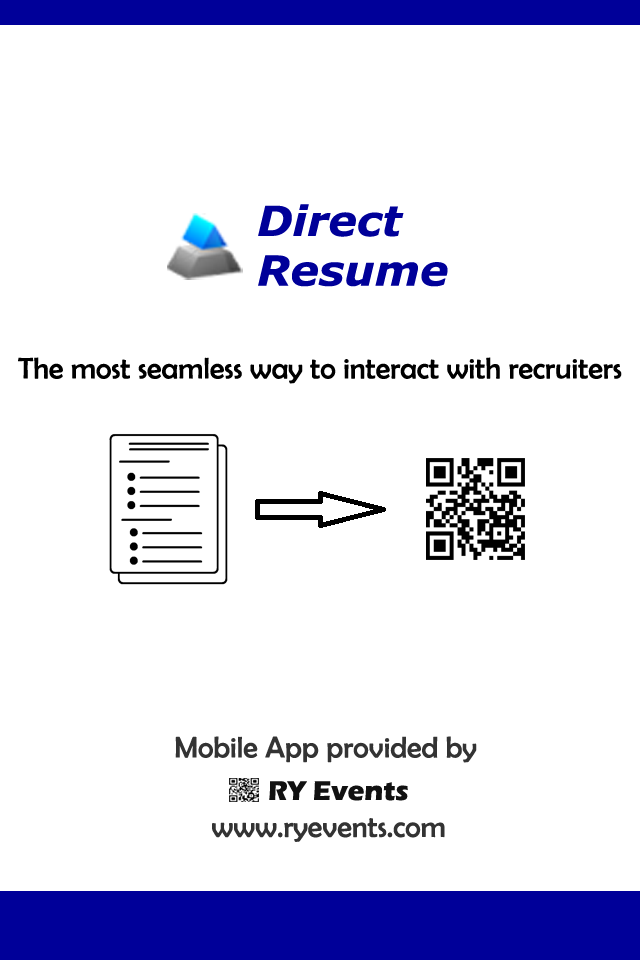
<style>
.page{position:relative;width:640px;height:960px;background:#ffffff}
.page>*{position:absolute;margin:0}
.t1{font:41.4px "Verdana-BoldItalic";color:#000099;scale:1.03 1}
.t2{font:30px "BerlinSansFB-Reg";color:#000000}
.t3{font:30px "BerlinSansFB-Reg";color:#333333}
</style>
<div class="page">
<p class="t1" style="left:258px;top:204px;width:190px;height:83px">Direct<br>Resume</p>
<p class="t2" style="left:18px;top:357px;width:604px;height:27px">The most seamless way to interact with recruiters</p>
<p class="t3" style="left:175px;top:736px;width:302px;height:27px">Mobile App provided by</p>
<p class="t3" style="left:212px;top:818px;width:233px;height:24px">www.ryevents.com</p>
</div>
